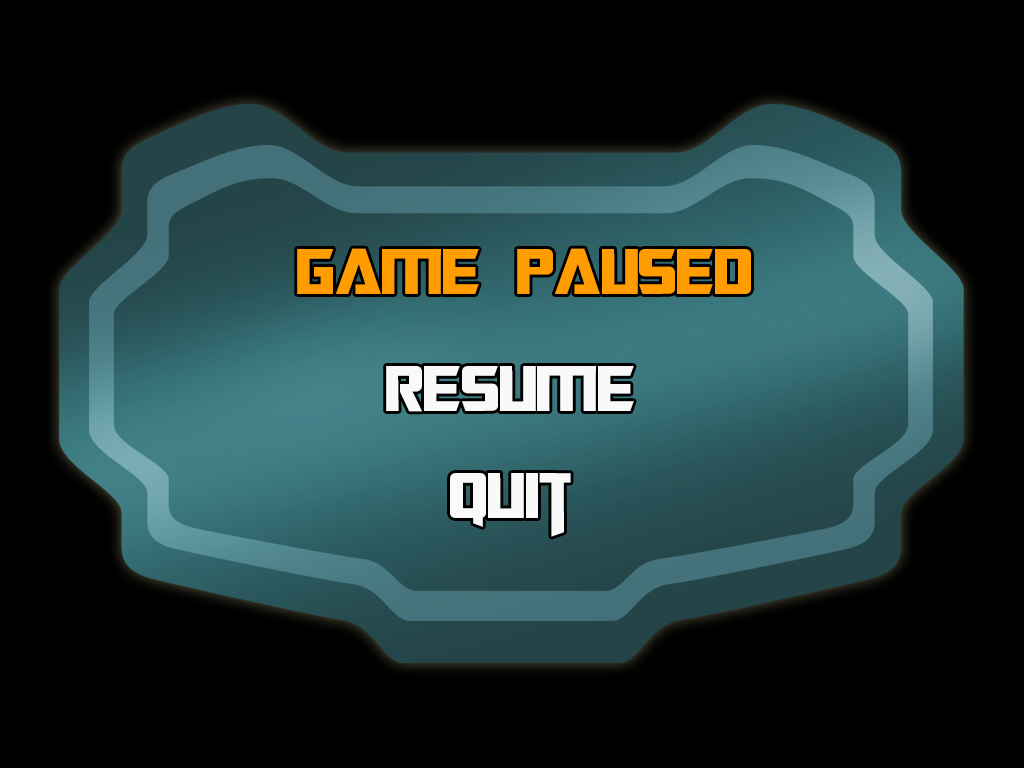
<style>
.page{position:relative;width:1024px;height:768px;background:#000000}
.page>*{position:absolute;margin:0}
.t1{font:72px "TransformersMovie";color:#ff9c00}
.t2{font:72px "TransformersMovie";color:#f9f9f9}
</style>
<div class="page">
<p class="t1" style="left:297px;top:248px;width:454px;height:46px">Game Paused</p>
<p class="t2" style="left:386px;top:365px;width:248px;height:47px">Resume</p>
<p class="t2" style="left:450px;top:473px;width:121px;height:64px">Quit</p>
</div>
